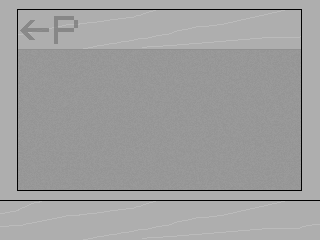
<style>
.page{position:relative;width:320px;height:240px;background:#aeaeae}
.page>*{position:absolute;margin:0}
.t1{font:37px "Small Fonts";color:#727272}
</style>
<div class="page">
<p class="t1" style="left:54px;top:16px;width:24px;height:28px;opacity:0.65">P</p>
</div>
